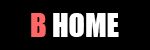
<style>
.page{position:relative;width:150px;height:50px;background:#000000}
.page>*{position:absolute;margin:0}
.t1{font:30px "Impact";color:#ffffff}
.t2{font:30px "Impact";color:#ff6666}
</style>
<div class="page">
<p class="t1" style="left:31px;top:13px;width:88px;height:24px"><span class="t2">B </span>HOME</p>
</div>
